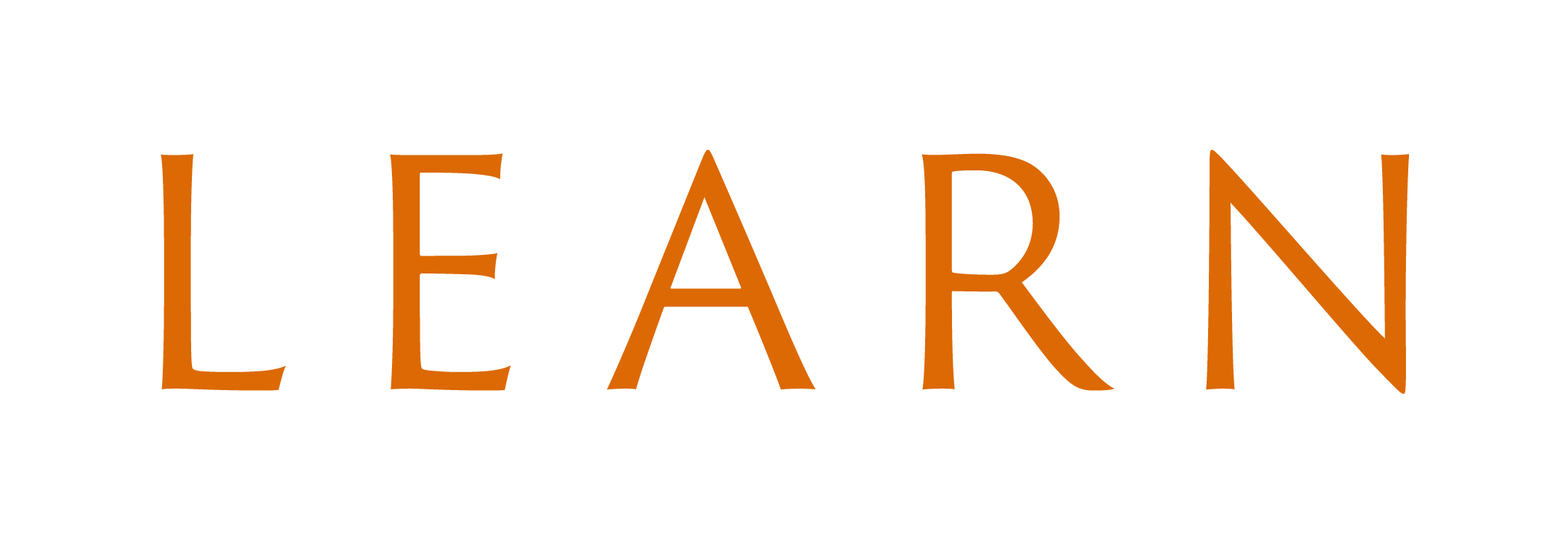
<style>
.page{position:relative;width:1568px;height:547px;background:#ffffff}
.page>*{position:absolute;margin:0}
.t1{font:311.1px "TrajanSansPro-Regular";letter-spacing:0.2em;color:#dc6903}
</style>
<div class="page">
<p class="t1" style="left:161px;top:149px;width:1249px;height:244px">LEARN</p>
</div>
